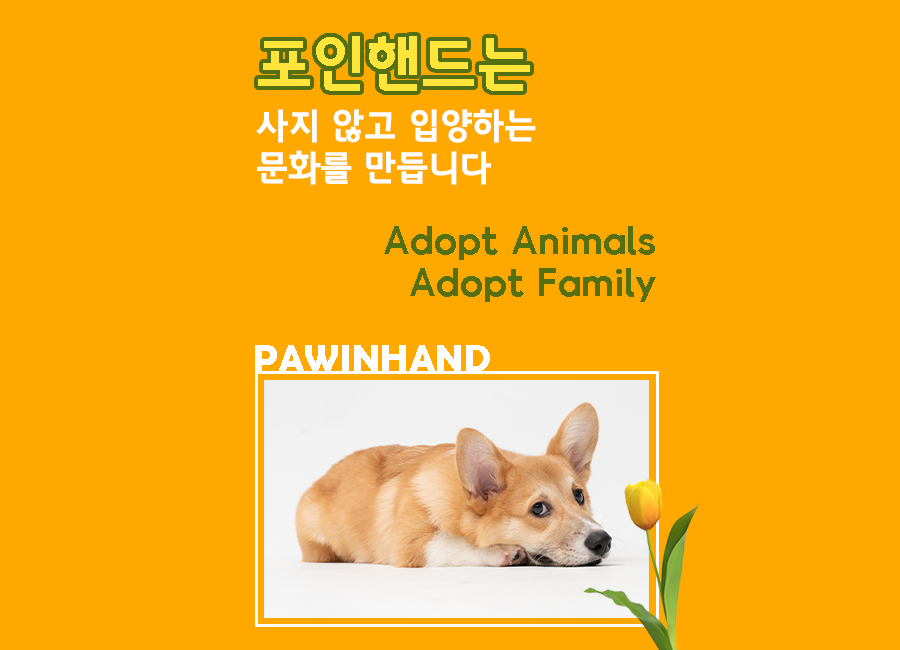
<style>
.page{position:relative;width:900px;height:650px;background:#ffa800}
.page>*{position:absolute;margin:0}
.t1{font:60px "GoyangDeogyangEB-Regular";letter-spacing:-0.002em;color:#ffe43a}
.t2{font:35px "GoyangDeogyangEB-Regular";letter-spacing:-0.002em;color:#ffffff}
.t3{font:35px "GoyangDeogyangEB-Regular";letter-spacing:-0.002em;color:#557012}
.t4{font:38.3px "BerlinSansFBDemi-Bold";letter-spacing:-0.002em;color:#ffffff}
</style>
<div class="page">
<p class="t1" style="left:258px;top:36px;width:272px;height:55px">포인핸드는</p>
<p class="t2" style="left:256px;top:109px;width:280px;height:76px">사지 않고 입양하는<br>문화를 만듭니다</p>
<p class="t3" style="left:384px;top:226px;width:272px;height:76px;text-align:right">Adopt Animals<br>Adopt Family</p>
<p class="t4" style="left:255px;top:345px;width:235px;height:26px">PAWINHAND</p>
</div>
